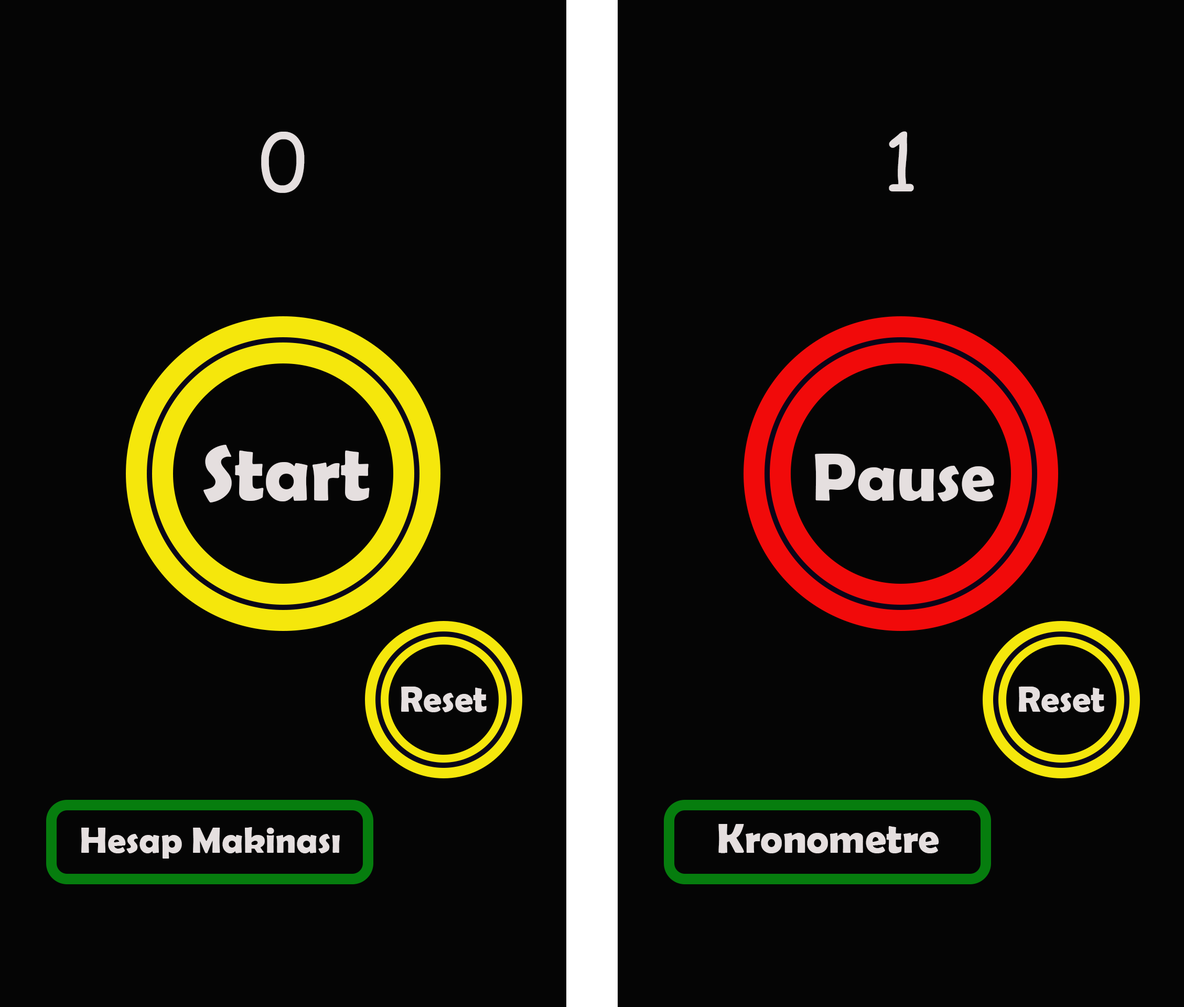
<style>
.page{position:relative;width:1184px;height:1007px;background:#050505}
.page>*{position:absolute;margin:0}
.t1{font:78.7px "ComicSansMS";color:#e5dfdf}
.t2{font:78.7px "BerlinSansFBDemi-Bold";color:#e5dfdf}
.t3{font:68.2px "BerlinSansFBDemi-Bold";color:#e5dfdf}
.t4{font:36.7px "BerlinSansFBDemi-Bold";color:#e5dfdf}
.t5{font:42px "BerlinSansFBDemi-Bold";color:#e5dfdf}
</style>
<div class="page">
<p class="t1" style="left:261px;top:132px;width:44px;height:61px">0</p>
<p class="t1" style="left:889px;top:131px;width:25px;height:60px">1</p>
<p class="t2" style="left:203px;top:445px;width:167px;height:57px">Start</p>
<p class="t3" style="left:815px;top:454px;width:179px;height:47px">Pause</p>
<p class="t4" style="left:401px;top:687px;width:86px;height:25px">Reset</p>
<p class="t4" style="left:1019px;top:687px;width:85px;height:25px">Reset</p>
<p class="t4" style="left:81px;top:827px;width:259px;height:32px">Hesap Makinası</p>
<p class="t5" style="left:718px;top:824px;width:221px;height:29px">Kronometre</p>
</div>
